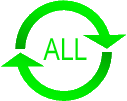
<style>
.page{position:relative;width:127px;height:101px;background:#ffffff}
.page>*{position:absolute;margin:0}
.t1{font:30.4px "ArialMT";color:#00e800;scale:0.81 1}
</style>
<div class="page">
<p class="t1" style="left:43px;top:38px;width:44px;height:22px">ALL</p>
</div>
